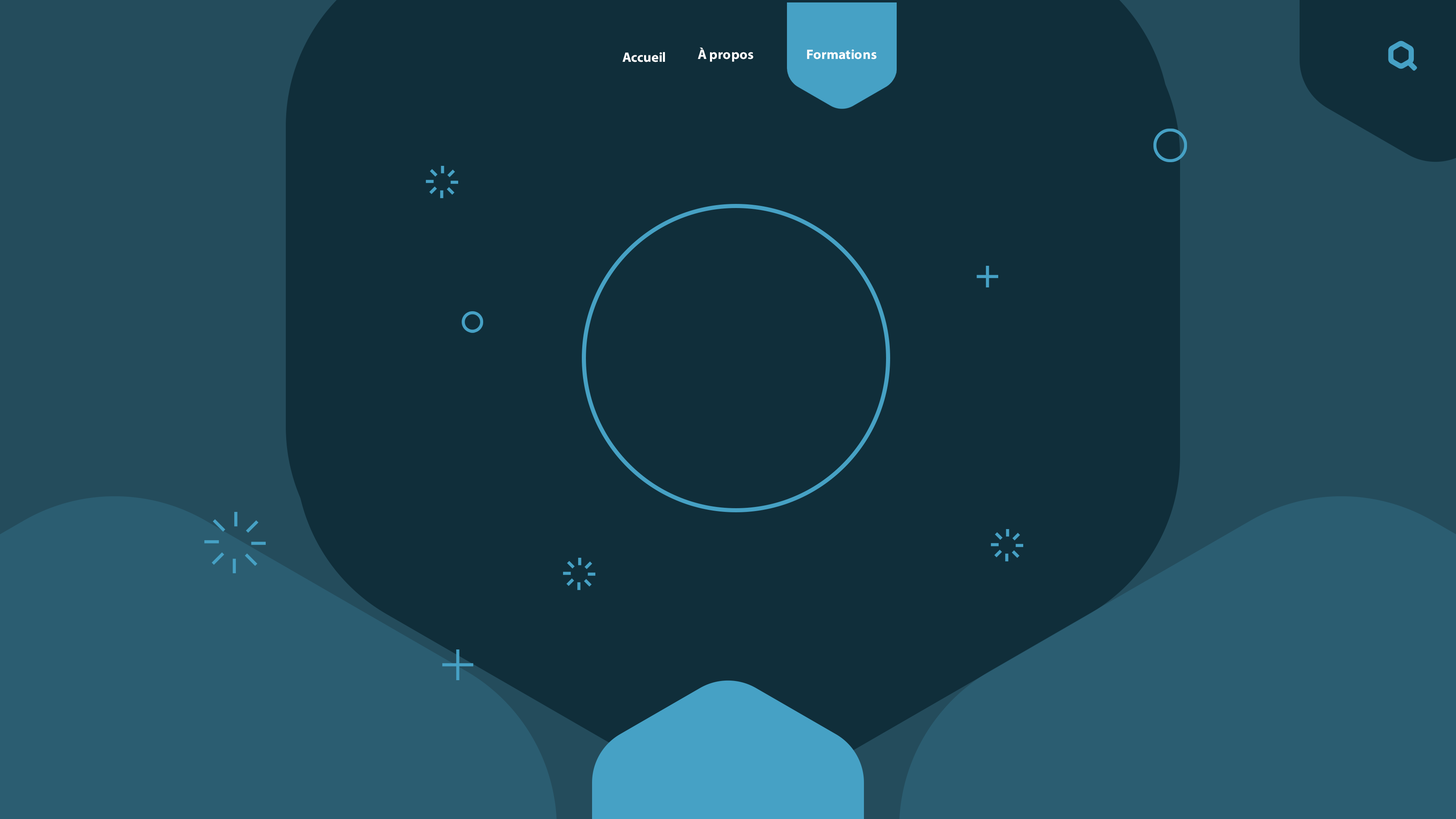
<style>
.page{position:relative;width:1456px;height:819px;background:#102e3a}
.page>*{position:absolute;margin:0}
.t1{font:13.6px "MyriadPro-Bold";color:#ffffff}
</style>
<div class="page">
<p class="t1" style="left:622px;top:52px;width:43px;height:10px">Accueil</p>
<p class="t1" style="left:698px;top:47px;width:55px;height:15px">À propos</p>
<p class="t1" style="left:807px;top:49px;width:70px;height:10px">Formations</p>
</div>
